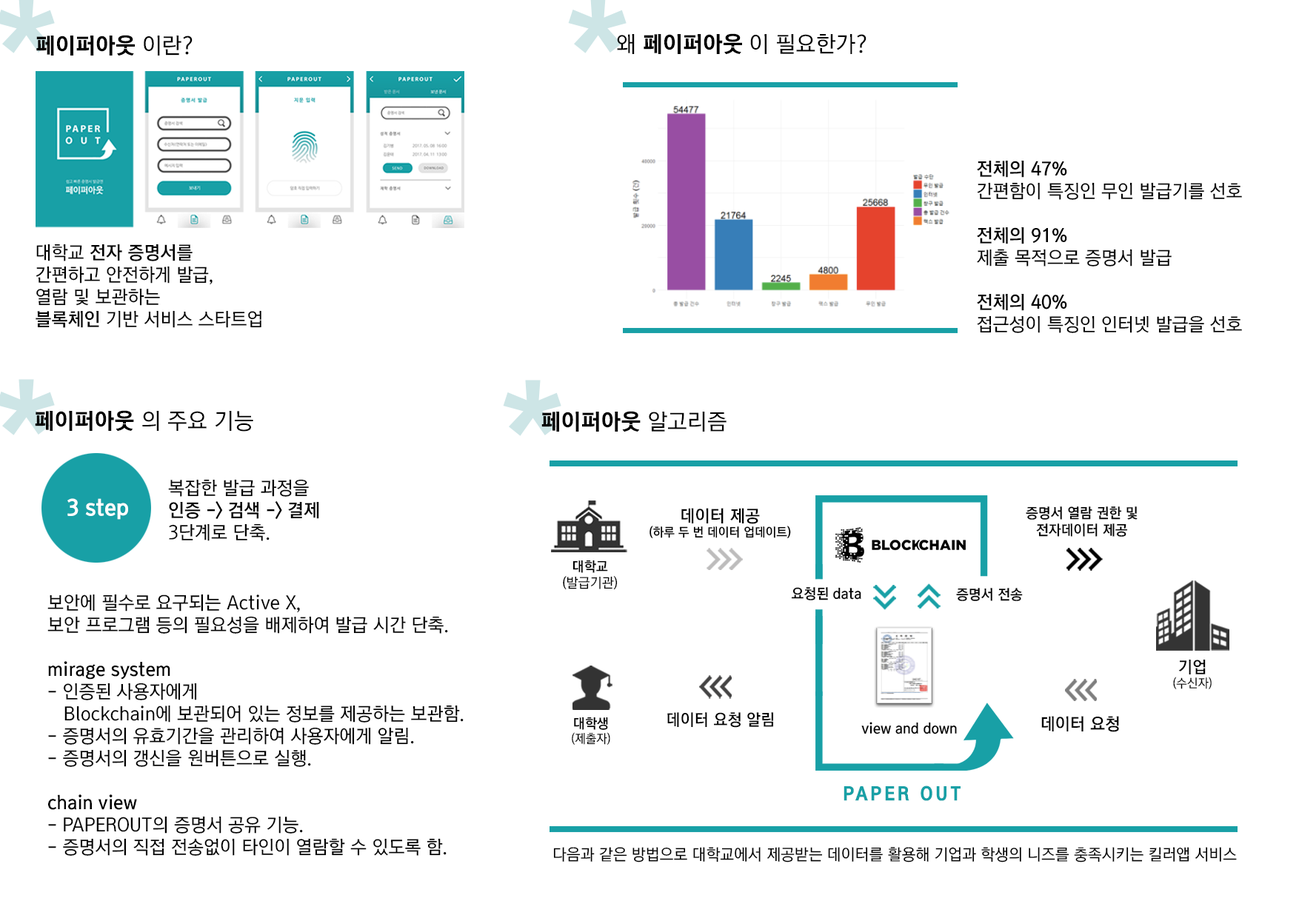
<style>
.page{position:relative;width:1299px;height:918px;background:#ffffff}
.page>*{position:absolute;margin:0}
.t1{font:22.4px "KoreanGD17-R";color:#000000}
.t2{font:22.4px "KoreanGD13-R";color:#000000}
.t3{font:18.5px "KoreanGD13-R";color:#000000}
.t4{font:18.5px "KoreanGD15-R";color:#000000}
.t5{font:135.8px "KoreanGD15-R";color:#cde5e6}
.t6{font:10.5px "KoreanGD17-R";color:#ffffff}
.t7{font:12.3px "KoreanGD15-R";color:#000000}
.t8{font:17px "KoreanGD15-R";color:#000000}
.t9{font:14.3px "KoreanGD15-R";color:#000000}
.t10{font:13.7px "KoreanGD13-R";color:#000000}
.t11{font:13.7px "KoreanGD15-R";color:#000000}
.t12{font:12.3px "KoreanGD13-R";color:#000000}
.t13{font:16.5px "KoreanGD15-R";color:#000000}
.t14{font:16.2px "KoreanGD15-R";color:#000000}
.t15{font:16.9px "KoreanGD15-R";color:#000000}
.t16{font:18.5px "KoreanGD19-R";letter-spacing:0.15em;color:#18a0a6}
.t17{font:16.1px "KoreanGD13-R";color:#000000}
</style>
<div class="page">
<p class="t1" style="left:36px;top:35px;width:157px;height:21px">페이퍼아웃<span class="t2"> 이란?</span></p>
<p class="t2" style="left:617px;top:33px;width:249px;height:21px">왜<span class="t1"> 페이퍼아웃</span> 이 필요한가?</p>
<p class="t3" style="left:977px;top:161px;width:265px;height:172px"><span class="t4">전체의 47%<br></span>간편함이 특징인 무인 발급기를 선호<br><br><span class="t4">전체의 91%<br></span>제출 목적으로 증명서 발급<br><br><span class="t4">전체의 40%<br></span>접근성이 특징인 인터넷 발급을 선호</p>
<p class="t3" style="left:36px;top:244px;width:225px;height:84px">대학교<span class="t4"> 전자 증명서</span>를<br>간편하고 안전하게 발급,<br>열람 및 보관하는<br><span class="t4">블록체인 </span>기반 서비스 스타트업</p>
<p class="t5" style="left:503px;top:380px;width:58px;height:56px">*</p>
<p class="t2" style="left:35px;top:410px;width:218px;height:22px"><span class="t1">페이퍼아웃 </span>의 주요 기능</p>
<p class="t1" style="left:541px;top:411px;width:185px;height:21px">페이퍼아웃<span class="t2"> 알고리즘</span></p>
<p class="t4" style="left:168px;top:479px;width:151px;height:62px"><span class="t3"><br>복잡한 발급 과정을<br></span>인증 -&gt; 검색 -&gt; 결제<br><span class="t3">3단계로 단축.</span></p>
<p class="t6" style="left:67px;top:498px;width:61px;height:22px">3 step</p>
<p class="t7" style="left:649px;top:508px;width:142px;height:30px;text-align:center"><span class="t8">데이터 제공<br></span>(하루 두 번 데이터 업데이트)</p>
<p class="t9" style="left:1026px;top:506px;width:111px;height:31px;text-align:center">증명서 열람 권한 및<br>전자데이터 제공</p>
<p class="t10" style="left:563px;top:560px;width:55px;height:30px;text-align:center"><span class="t11">대학교<br></span>(발급기관)</p>
<p class="t3" style="left:47px;top:594px;width:417px;height:262px">보안에 필수로 요구되는 Active X,<br>보안 프로그램 등의 필요성을 배제하여 발급 시간 단축.<br><br><span class="t4">mirage system<br></span>- 인증된 사용자에게<br>   Blockchain에 보관되어 있는 정보를 제공하는 보관함.<br>- 증명서의 유효기간을 관리하여 사용자에게 알림.<br>- 증명서의 갱신을 원버튼으로 실행.  <br><br><span class="t4">chain view<br></span>- PAPEROUT의 증명서 공유 기능.<br>- 증명서의 직접 전송없이 타인이 열람할 수 있도록 함.</p>
<p class="t9" style="left:791px;top:587px;width:70px;height:13px">요청된 data</p>
<p class="t9" style="left:956px;top:588px;width:67px;height:13px">증명서 전송</p>
<p class="t12" style="left:1173px;top:660px;width:38px;height:29px;text-align:center"><span class="t13">기업<br></span>(수신자)</p>
<p class="t14" style="left:667px;top:712px;width:106px;height:16px">데이터 요청 알림</p>
<p class="t12" style="left:572px;top:717px;width:38px;height:28px;text-align:center"><span class="t11">대학생<br></span>(제출자)</p>
<p class="t9" style="left:861px;top:722px;width:96px;height:13px">view and down</p>
<p class="t15" style="left:1041px;top:716px;width:78px;height:16px">데이터 요청</p>
<p class="t16" style="left:843px;top:786px;width:117px;height:15px">PAPER OUT</p>
<p class="t17" style="left:553px;top:847px;width:684px;height:16px">다음과 같은 방법으로 대학교에서 제공받는 데이터를 활용해 기업과 학생의 니즈를 충족시키는 킬러앱 서비스</p>
</div>
